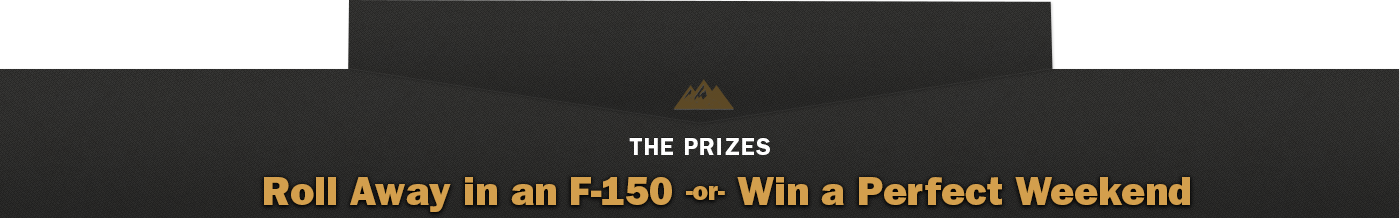
<style>
.page{position:relative;width:1400px;height:218px}
.page>*{position:absolute;margin:0}
.t1{font:24px "FranklinGothic-Demi";letter-spacing:0.04em;color:#ffffff;text-transform:uppercase}
.t2{font:40px "FranklinGothic-Heavy";color:#d39f4d}
.t3{font:26px "FranklinGothic-Heavy";color:#d39f4d}
</style>
<div class="page">
<p class="t1" style="left:629px;top:138px;width:141px;height:17px">The Prizes</p>
<p class="t2" style="left:264px;top:177px;width:926px;height:35px">Roll Away in an F-150 <span class="t3">-or- </span>Win a Perfect Weekend</p>
</div>
